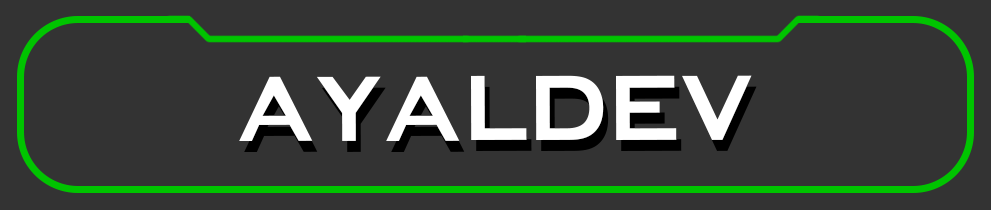
<style>
.page{position:relative;width:991px;height:210px;background:#333333}
.page>*{position:absolute;margin:0}
.t1{font:117.1px "Media-Gothic";letter-spacing:-0.02em;color:#ffffff}
</style>
<div class="page">
<p class="t1" style="left:239px;top:75px;width:513px;height:66px">ayaldev</p>
</div>
